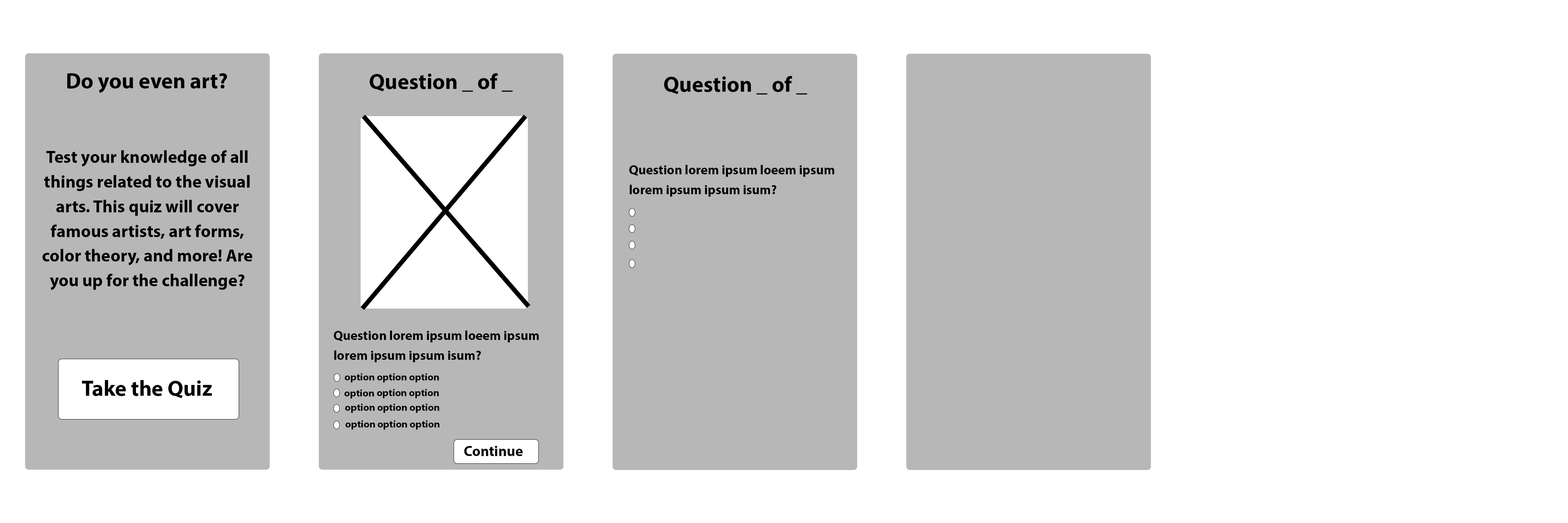
<style>
.page{position:relative;width:1568px;height:523px;background:#ffffff}
.page>*{position:absolute;margin:0}
.t1{font:21.8px "MyriadPro-Bold";color:#000000}
.t2{font:17.4px/24.7px "MyriadPro-Bold";color:#000000}
.t3{font:13.1px/19.7px "MyriadPro-Bold";color:#000000}
.t4{font:10.2px "MyriadPro-Bold";color:#000000}
.t5{font:14.5px "MyriadPro-Bold";color:#000000}
</style>
<div class="page">
<p class="t1" style="left:67px;top:73px;width:160px;height:20px">Do you even art?</p>
<p class="t1" style="left:370px;top:73px;width:143px;height:19px">Question _ of _</p>
<p class="t1" style="left:664px;top:76px;width:143px;height:18px">Question _ of _</p>
<p class="t2" style="left:43px;top:150px;width:209px;height:140px;text-align:center">Test your knowledge of all things related to the visual arts. This quiz will cover famous artists, art forms, color theory, and more! Are you up for the challenge?</p>
<p class="t3" style="left:629px;top:165px;width:205px;height:32px">Question lorem ipsum loeem ipsum lorem ipsum ipsum isum?</p>
<p class="t3" style="left:334px;top:330px;width:205px;height:32px">Question lorem ipsum loeem ipsum lorem ipsum ipsum isum?</p>
<p class="t4" style="left:345px;top:373px;width:94px;height:9px">option option option</p>
<p class="t1" style="left:82px;top:380px;width:130px;height:18px">Take the Quiz</p>
<p class="t4" style="left:344px;top:389px;width:30px;height:9px">option</p>
<p class="t4" style="left:377px;top:389px;width:62px;height:9px">option option</p>
<p class="t4" style="left:345px;top:403px;width:94px;height:10px">option option option</p>
<p class="t4" style="left:345px;top:420px;width:30px;height:9px">option</p>
<p class="t4" style="left:378px;top:420px;width:61px;height:9px">option option</p>
<p class="t5" style="left:464px;top:445px;width:59px;height:11px">Continue</p>
</div>
